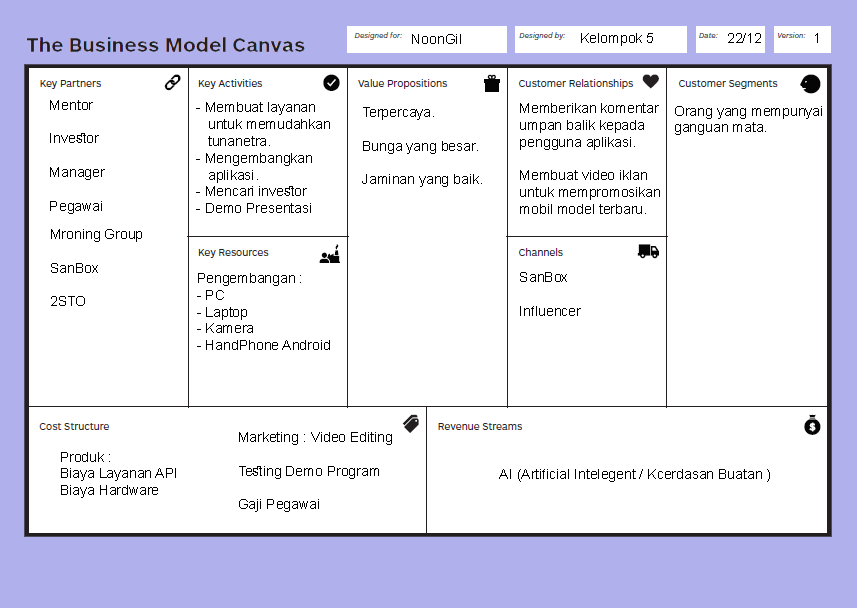
<style>
.page{position:relative;width:857px;height:608px;background:#ffffff}
.page>*{position:absolute;margin:0}
.t1{font:14px "ArialMT";color:#000000}
</style>
<div class="page">
<p class="t1" style="left:412px;top:34px;width:49px;height:10px">NoonGil</p>
<p class="t1" style="left:581px;top:33px;width:72px;height:13px">Kelompok 5</p>
<p class="t1" style="left:728px;top:33px;width:33px;height:10px">22/12</p>
<p class="t1" style="left:815px;top:33px;width:3px;height:10px">1</p>
<p class="t1" style="left:50px;top:100px;width:55px;height:114px">Mentor<br><br>Investor<br><br>Manager<br><br>Pegawai</p>
<p class="t1" style="left:196px;top:102px;width:134px;height:111px">- Membuat layanan <br>   untuk memudahkan <br>   tunanetra.<br>- Mengembangkan <br>   aplikasi.<br>- Mencari investor<br>- Demo Presentasi</p>
<p class="t1" style="left:362px;top:107px;width:120px;height:80px">Terpercaya.<br><br>Bunga yang besar.<br><br>Jaminan yang baik.</p>
<p class="t1" style="left:520px;top:103px;width:140px;height:111px">Memberikan komentar <br>umpan balik kepada <br>pengguna aplikasi.<br><br>Membuat video iklan <br>untuk mempromosikan <br>mobil model terbaru.</p>
<p class="t1" style="left:675px;top:106px;width:147px;height:29px">Orang yang mempunyai <br>ganguan mata.</p>
<p class="t1" style="left:51px;top:229px;width:91px;height:77px">Mroning Group<br><br>SanBox<br><br>2STO</p>
<p class="t1" style="left:197px;top:273px;width:133px;height:77px">Pengembangan :<br>- PC<br>- Laptop<br>- Kamera<br>- HandPhone Android</p>
<p class="t1" style="left:520px;top:272px;width:61px;height:44px">SanBox<br><br>Influencer</p>
<p class="t1" style="left:239px;top:432px;width:153px;height:80px">Marketing : Video Editing<br><br>Testing Demo Program<br><br>Gaji Pegawai</p>
<p class="t1" style="left:61px;top:452px;width:115px;height:46px">Produk :<br>Biaya Layanan API<br>Biaya Hardware</p>
<p class="t1" style="left:499px;top:469px;width:271px;height:13px">AI (Artificial Intelegent / Kcerdasan Buatan )</p>
</div>
